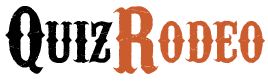
<style>
.page{position:relative;width:268px;height:82px;background:#ffffff}
.page>*{position:absolute;margin:0}
.t1{font:72px "CarnivaleeFreakshow";color:#cb5c2d}
.t2{font:90px "CarnivaleeFreakshow";color:#000000}
.t3{font:72px "CarnivaleeFreakshow";color:#000000}
.t4{font:90px "CarnivaleeFreakshow";color:#cb5c2d}
</style>
<div class="page">
<p class="t1" style="left:5px;top:6px;width:260px;height:68px"><span class="t2">Q</span><span class="t3">uiz</span><span class="t4">R</span>odeo</p>
</div>
